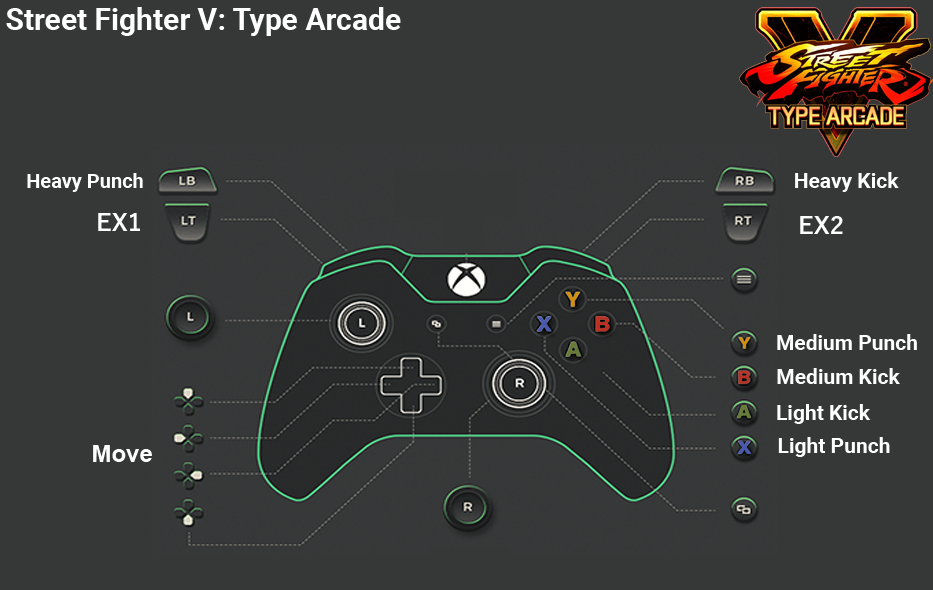
<style>
.page{position:relative;width:933px;height:590px;background:#363838}
.page>*{position:absolute;margin:0}
.t1{font:30px "Roboto-Bold";color:#ffffff}
.t2{font:20px "Roboto-Bold";color:#ffffff}
.t3{font:21px "Roboto-Bold";color:#ffffff}
.t4{font:24px "YuGothic-Bold";color:#ffffff}
.t5{font:24px "Arial-BoldMT";color:#fefefe}
</style>
<div class="page">
<p class="t1" style="left:6px;top:7px;width:395px;height:29px">Street Fighter V: Type Arcade</p>
<p class="t2" style="left:27px;top:173px;width:116px;height:19px">Heavy Punch</p>
<p class="t3" style="left:795px;top:172px;width:104px;height:20px">Heavy Kick</p>
<p class="t4" style="left:98px;top:213px;width:42px;height:18px">EX1</p>
<p class="t4" style="left:800px;top:216px;width:43px;height:18px">EX2</p>
<p class="t3" style="left:777px;top:334px;width:140px;height:16px">Medium Punch</p>
<p class="t3" style="left:777px;top:368px;width:123px;height:16px">Medium Kick</p>
<p class="t3" style="left:777px;top:404px;width:94px;height:20px">Light Kick</p>
<p class="t3" style="left:778px;top:437px;width:112px;height:20px">Light Punch</p>
<p class="t5" style="left:93px;top:445px;width:59px;height:17px">Move</p>
</div>
